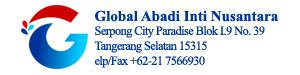
<style>
.page{position:relative;width:300px;height:75px;background:#ffffff}
.page>*{position:absolute;margin:0}
.t1{font:15px "TimesNewRomanPS-BoldMT";color:#00379b}
.t2{font:12.5px "TimesNewRomanPSMT";letter-spacing:-0.05em;color:#00379b}
</style>
<div class="page">
<p class="t1" style="left:95px;top:10px;width:184px;height:12px">Global Abadi Inti Nusantara</p>
<p class="t2" style="left:94px;top:26px;width:171px;height:42px">Serpong City Paradise Blok I.9 No. 39<br>Tangerang Selatan 15315<br>elp/Fax +62-21 7566930</p>
</div>
